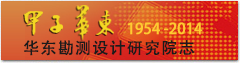
<style>
.page{position:relative;width:240px;height:63px}
.page>*{position:absolute;margin:0}
.t1{font:15px "AdobeHeitiStd-Regular";color:#fecb31}
.t2{font:16px "AdobeHeitiStd-Regular";letter-spacing:0.08em;color:#1b1b1b}
</style>
<div class="page">
<p class="t1" style="left:128px;top:22px;width:75px;height:13px">1954 -2014</p>
<p class="t2" style="left:24px;top:40px;width:171px;height:16px">华东勘测设计研究院志</p>
</div>
